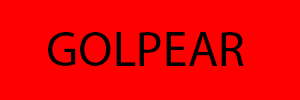
<style>
.page{position:relative;width:300px;height:100px;background:#ff0000}
.page>*{position:absolute;margin:0}
.t1{font:50px "MyriadPro-Regular";color:#000000}
</style>
<div class="page">
<p class="t1" style="left:48px;top:32px;width:196px;height:34px">GOLPEAR</p>
</div>
